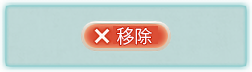
<style>
.page{position:relative;width:252px;height:72px}
.page>*{position:absolute;margin:0}
.t1{font:18px "GothicMB101Pr6N-Light";color:#fff9fd}
</style>
<div class="page">
<p class="t1" style="left:116px;top:27px;width:36px;height:18px">移除</p>
</div>
